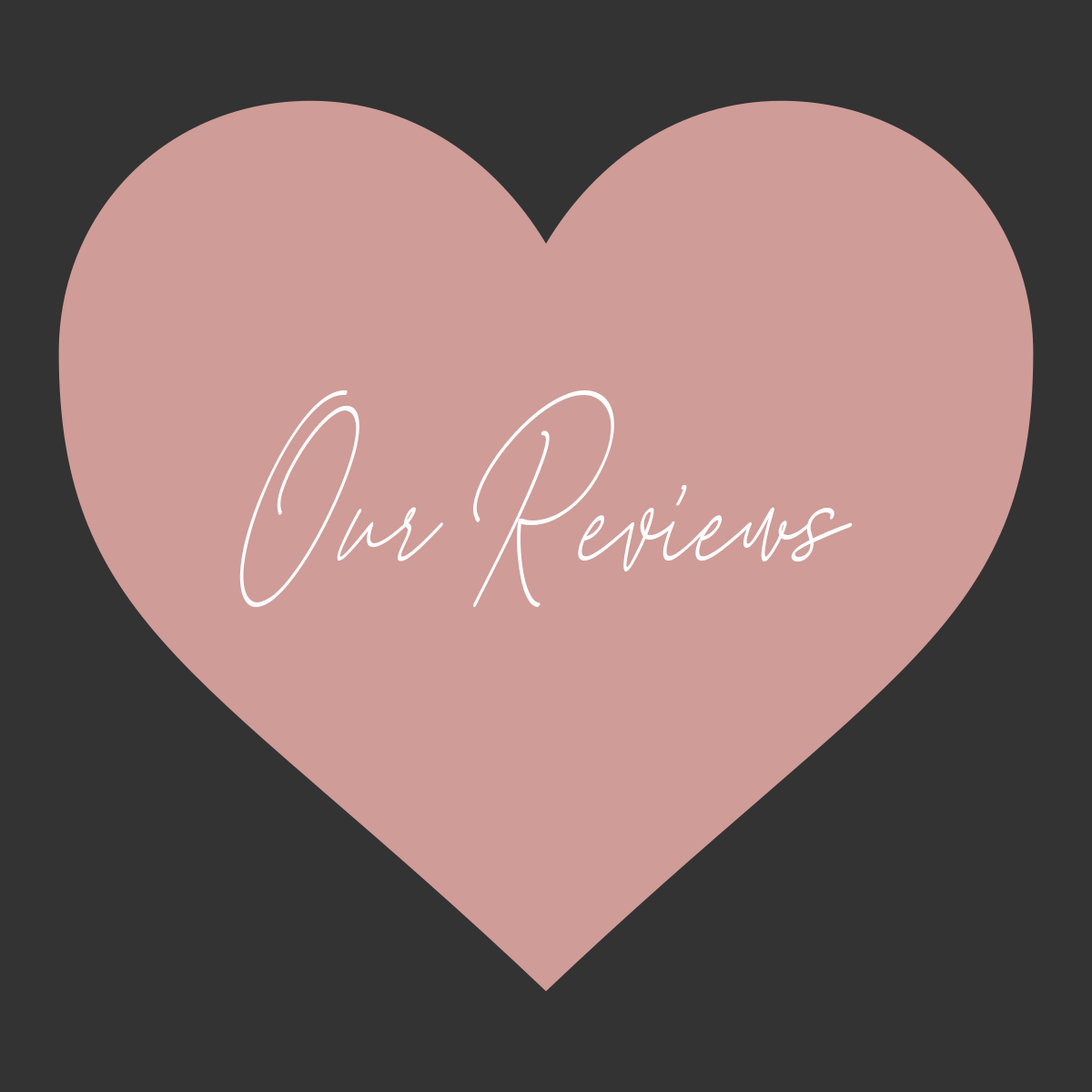
<style>
.page{position:relative;width:1092px;height:1092px;background:#333333}
.page>*{position:absolute;margin:0}
.t1{font:182px "AugustScriptBoldfree";color:#ffffff;scale:0.7 1}
</style>
<div class="page">
<p class="t1" style="left:239px;top:390px;width:614px;height:217px">Our Reviews</p>
</div>
